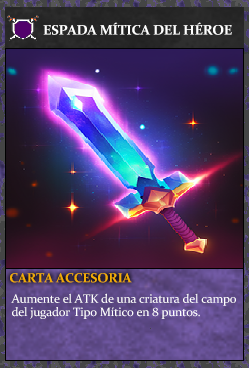
<style>
.page{position:relative;width:249px;height:368px}
.page>*{position:absolute;margin:0}
.t1{font:13.9px "Constantia-Bold";letter-spacing:-0.02em;color:#ffffff}
.t2{font:13.3px "Constantia-Bold";letter-spacing:-0.02em;color:#f2ac05}
.t3{font:12.3px/13.3px "Constantia";letter-spacing:-0.02em;color:#ffffff}
</style>
<div class="page">
<p class="t1" style="left:43px;top:22px;width:189px;height:13px">ESPADA MÍTICA DEL HÉROE</p>
<p class="t2" style="left:10px;top:273px;width:122px;height:10px">CARTA ACCESORIA</p>
<p class="t3" style="left:11px;top:293px;width:225px;height:26px">Aumente el ATK de una criatura del campo<br>del jugador Tipo Mítico en 8 puntos.</p>
</div>
